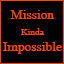
<style>
.page{position:relative;width:64px;height:64px;background:#000000}
.page>*{position:absolute;margin:0}
.t1{font:20px/16px "Microsoft-Himalaya";color:#ff4500}
.t2{font:14px/16px "Microsoft-Himalaya";color:#ff4500}
</style>
<div class="page">
<p class="t1" style="left:3px;top:10px;width:59px;height:44px;text-align:center">Mission<br><span class="t2">Kinda<br></span>Impossible</p>
</div>
